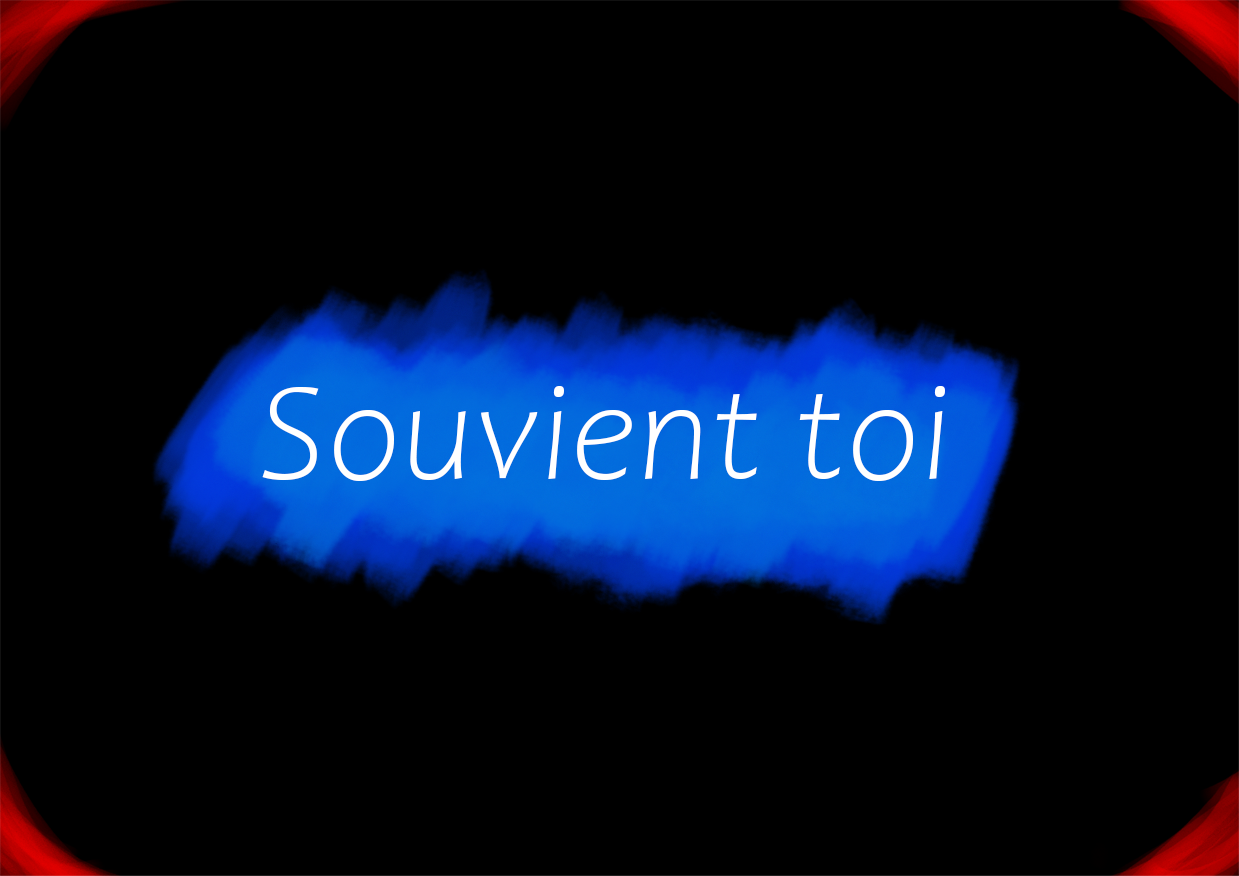
<style>
.page{position:relative;width:1239px;height:876px;background:#000000}
.page>*{position:absolute;margin:0}
.t1{font:141.3px "Candara-LightItalic";color:#ffffff}
</style>
<div class="page">
<p class="t1" style="left:262px;top:386px;width:683px;height:95px">Souvient toi</p>
</div>
